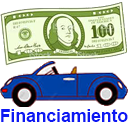
<style>
.page{position:relative;width:128px;height:128px;background:#ffffff}
.page>*{position:absolute;margin:0}
.t1{font:17.5px "Arial-BoldMT";color:#0d18f3}
</style>
<div class="page">
<p class="t1" style="left:1px;top:109px;width:127px;height:13px">Financiamiento</p>
</div>
